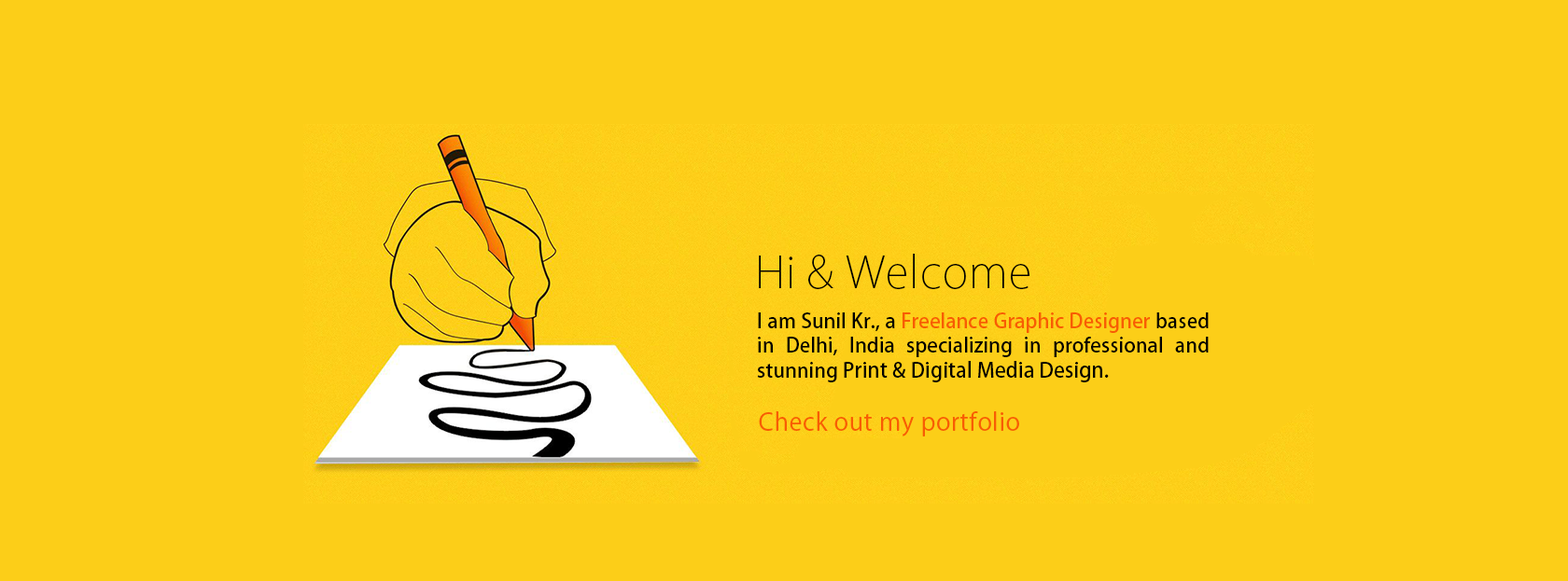
<style>
.page{position:relative;width:1568px;height:581px;background:#fcce18}
.page>*{position:absolute;margin:0}
.t1{font:42.9px "KozGoPr6N-ExtraLight";letter-spacing:0.025em;color:#000000}
.t2{font:20px "KozGoPr6N-Medium";color:#000000}
.t3{font:20px "KozGoPr6N-Medium";color:#f85c04}
.t4{font:20.5px "KozGoPr6N-Medium";color:#000000}
.t5{font:24.3px "KozGoPr6N-Regular";letter-spacing:0.025em;color:#f85c04}
</style>
<div class="page">
<p class="t1" style="left:759px;top:254px;width:270px;height:35px">Hi &amp; Welcome</p>
<p class="t2" style="left:757px;top:313px;width:452px;height:70px;text-align:justify">I am Sunil Kr., a <span class="t3">Freelance Graphic Designer </span>based in Delhi, India specializing in professional and stunning <span class="t4">Print &amp; Digital Media Design.</span></p>
<p class="t5" style="left:759px;top:412px;width:260px;height:25px">Check out my portfolio</p>
</div>
